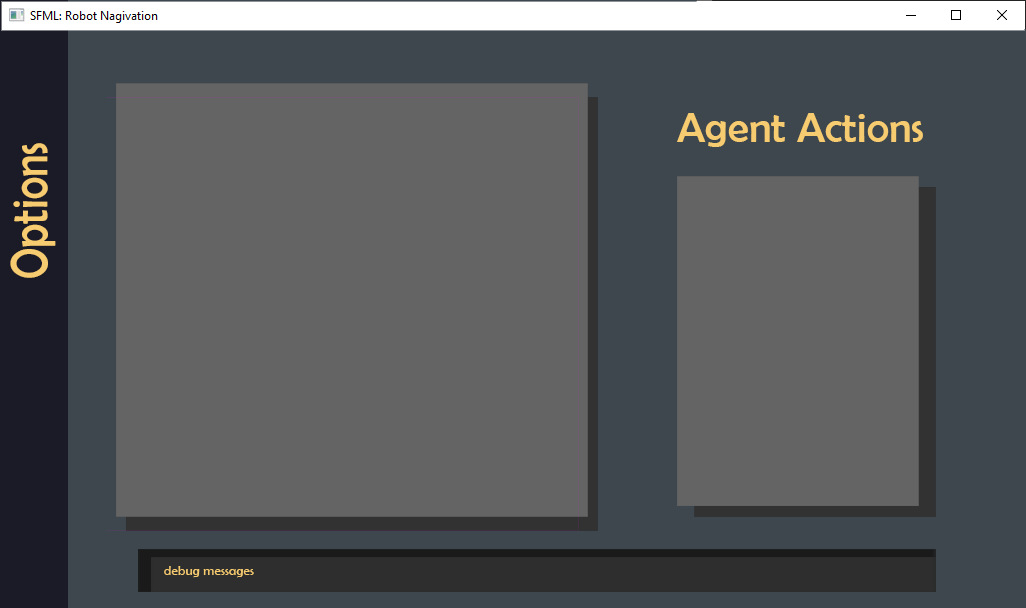
<style>
.page{position:relative;width:1026px;height:608px;background:#646464}
.page>*{position:absolute;margin:0}
.t1{font:43px "BerlinSansFB-Reg";color:#f7cc70}
.t2{font:52.6px "BerlinSansFB-Reg";color:#f7cc70;scale:0.82 1}
.t3{font:13.4px "BerlinSansFB-Reg";color:#f7cc70}
</style>
<div class="page">
<p class="t1" style="left:677px;top:113px;width:246px;height:34px">Agent Actions</p>
<p class="t2" style="left:10px;top:143px;width:46px;height:135px;rotate:-90deg">Options</p>
<p class="t3" style="left:164px;top:566px;width:90px;height:12px">debug messages</p>
</div>
